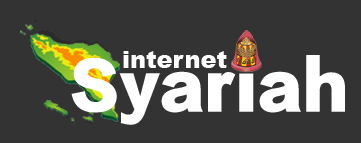
<style>
.page{position:relative;width:361px;height:143px;background:#333333}
.page>*{position:absolute;margin:0}
.t1{font:24px "Arial-Black";color:#ffffff}
.t2{font:68px "FZCCHK--GBK1-0";color:#ffffff}
</style>
<div class="page">
<p class="t1" style="left:123px;top:51px;width:104px;height:17px">internet</p>
<p class="t2" style="left:71px;top:55px;width:274px;height:70px">Syariah</p>
</div>
